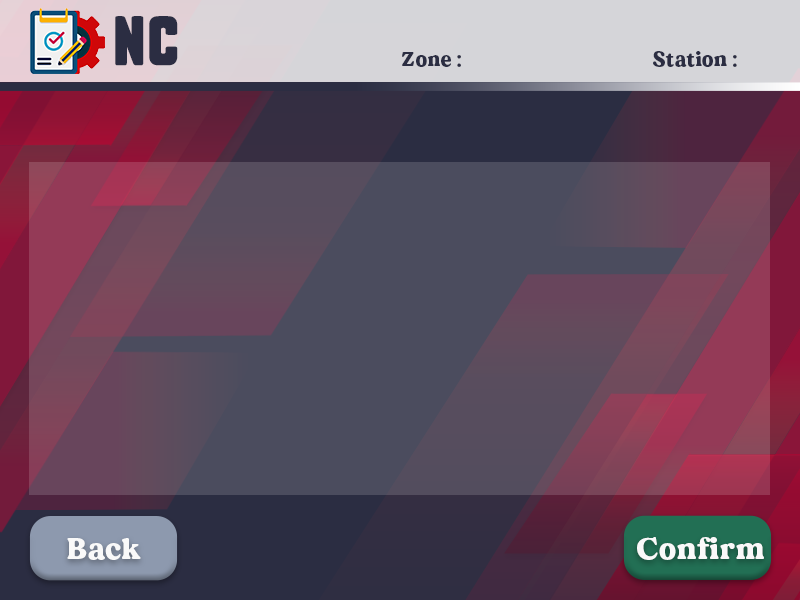
<style>
.page{position:relative;width:800px;height:600px}
.page>*{position:absolute;margin:0}
.t1{font:48px "SubtleCurves";letter-spacing:0.025em;color:#2b2d42}
.t2{font:20px "MADEDillan";letter-spacing:0.025em;color:#2b2d42}
.t3{font:30px "MADEDillan";letter-spacing:0.025em;color:#f9f9f9}
</style>
<div class="page">
<p class="t1" style="left:115px;top:16px;width:63px;height:50px">NC</p>
<p class="t2" style="left:402px;top:52px;width:59px;height:15px">Zone :</p>
<p class="t2" style="left:653px;top:51px;width:84px;height:16px">Station :</p>
<p class="t3" style="left:67px;top:538px;width:74px;height:22px">Back</p>
<p class="t3" style="left:637px;top:537px;width:127px;height:23px">Confirm</p>
</div>
